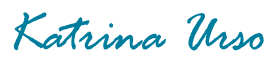
<style>
.page{position:relative;width:278px;height:63px;background:#ffffff}
.page>*{position:absolute;margin:0}
.t1{font:55px "RageItalic";color:#007d9c}
</style>
<div class="page">
<p class="t1" style="left:13px;top:12px;width:251px;height:39px">Katrina Urso</p>
</div>
